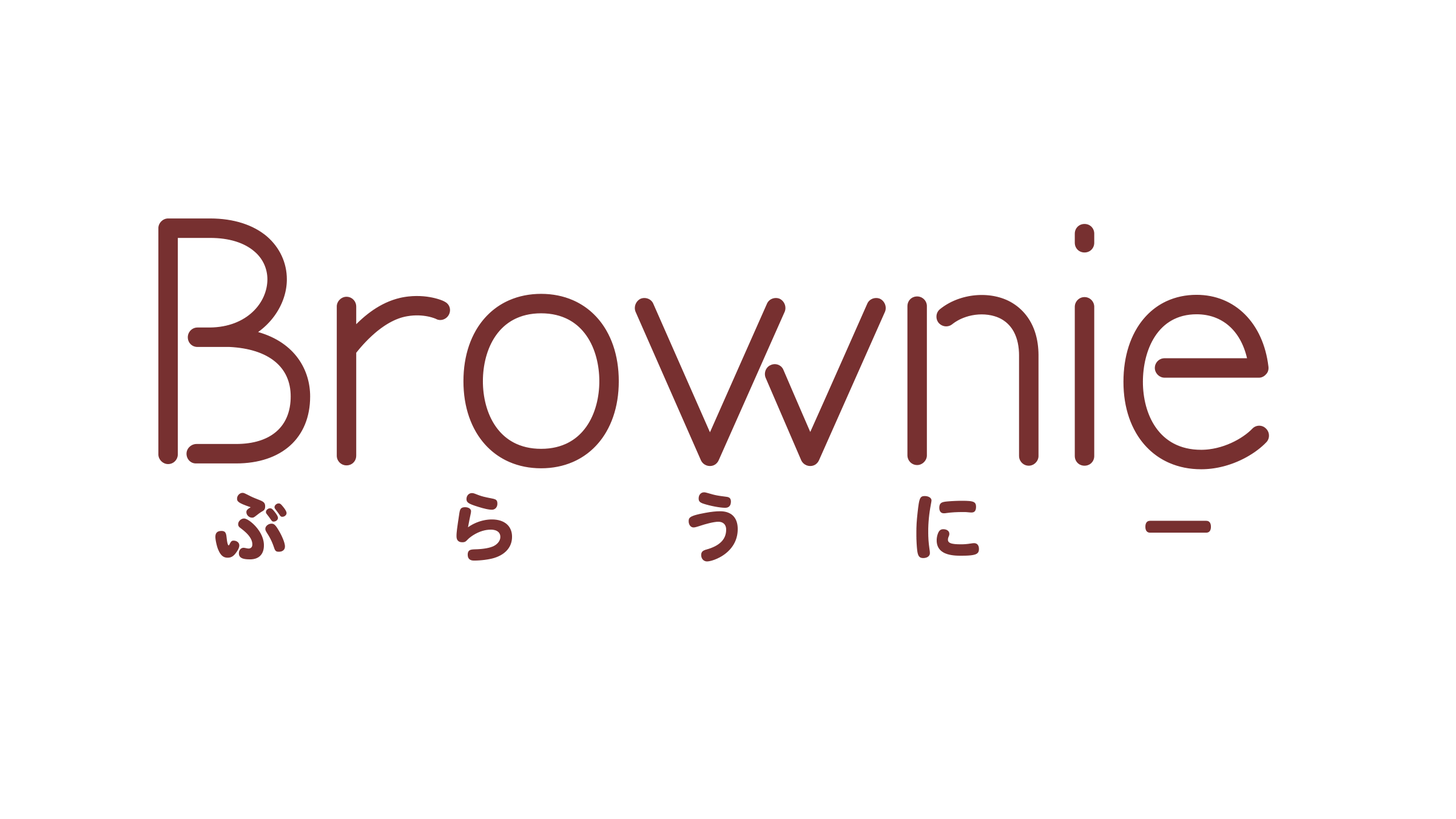
<style>
.page{position:relative;width:1456px;height:819px;background:#ffffff}
.page>*{position:absolute;margin:0}
.t1{font:323.6px "TA-kotodama_r";color:#773030}
.t2{font:72.8px "HeiseiMaruGoStd-W8";color:#773030}
</style>
<div class="page">
<p class="t1" style="left:158px;top:218px;width:1111px;height:252px">Brownie</p>
<p class="t2" style="left:215px;top:492px;width:996px;height:70px">ぶ　   ら　   う　   に　   ー</p>
</div>
